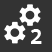
<style>
.page{position:relative;width:52px;height:52px;background:#333333}
.page>*{position:absolute;margin:0}
.t1{font:24px "Consolas-Bold";color:#ffffff}
</style>
<div class="page">
<p class="t1" style="left:31px;top:29px;width:11px;height:15px">2</p>
</div>
